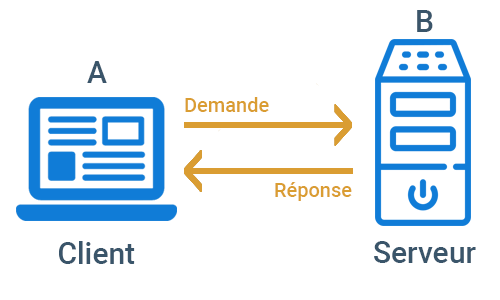
<style>
.page{position:relative;width:500px;height:300px;background:#ffffff}
.page>*{position:absolute;margin:0}
.t1{font:30px "Roboto-Medium";color:#3a556a}
.t2{font:20px "Roboto-Medium";color:#da9d32}
</style>
<div class="page">
<p class="t1" style="left:417px;top:10px;width:16px;height:22px">B</p>
<p class="t1" style="left:87px;top:61px;width:20px;height:22px">A</p>
<p class="t2" style="left:185px;top:97px;width:84px;height:15px">Demande</p>
<p class="t2" style="left:275px;top:182px;width:77px;height:19px">Réponse</p>
<p class="t1" style="left:59px;top:241px;width:76px;height:23px">Client</p>
<p class="t1" style="left:374px;top:241px;width:102px;height:22px">Serveur</p>
</div>
